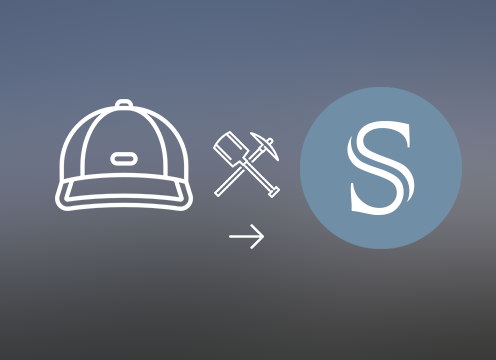
<style>
.page{position:relative;width:496px;height:360px}
.page>*{position:absolute;margin:0}
.t1{font:176px "ColonnaMT";color:#ffffff;scale:0.96 1}
</style>
<div class="page">
<p class="t1" style="left:347px;top:121px;width:68px;height:94px">S</p>
</div>
